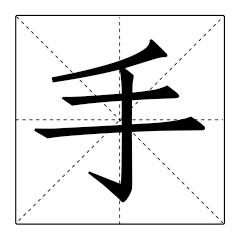
<style>
.page{position:relative;width:240px;height:240px;background:#ffffff}
.page>*{position:absolute;margin:0}
.t1{font:180px "ZhuqueFangsong-Regular";color:#000000;scale:1.09 1}
</style>
<div class="page">
<p class="t1" style="left:34px;top:39px;width:172px;height:164px">手</p>
</div>
